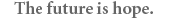
<style>
.page{position:relative;width:170px;height:20px;background:#ffffff}
.page>*{position:absolute;margin:0}
.t1{font:18px "Minion-Bold";color:#666666}
</style>
<div class="page">
<p class="t1" style="left:14px;top:1px;width:139px;height:17px">The future is hope.</p>
</div>
